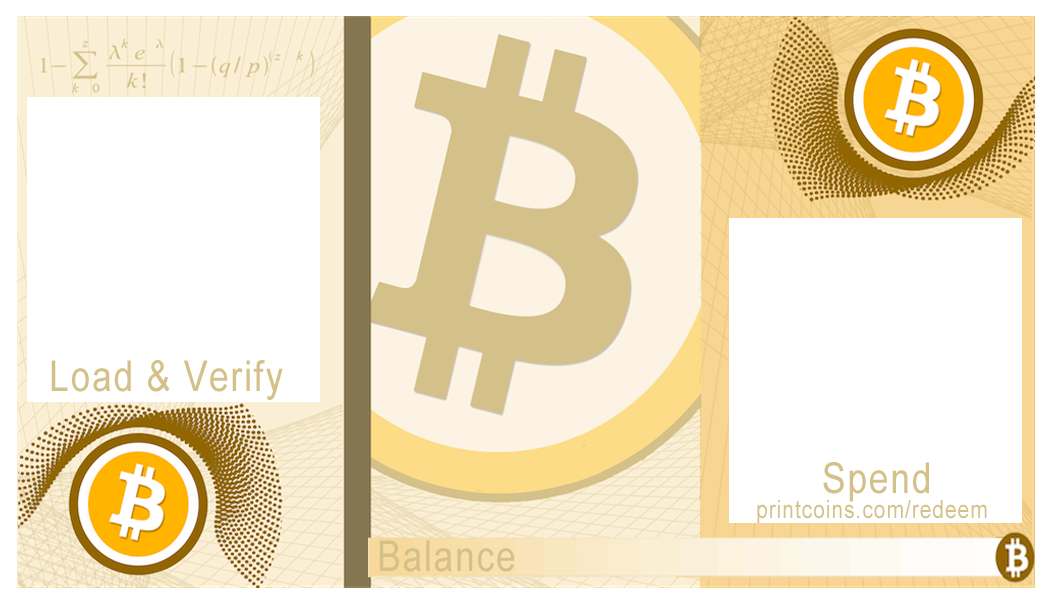
<style>
.page{position:relative;width:1050px;height:600px;background:#ffffff}
.page>*{position:absolute;margin:0}
.t1{font:42.5px "ArialMT";letter-spacing:0.05em;color:#d4c18a;scale:0.83 1}
.t2{font:25px "ArialMT";letter-spacing:0.05em;color:#d4c18a;scale:0.83 1}
</style>
<div class="page">
<p class="t1" style="left:51px;top:360px;width:232px;height:40px">Load &amp; Verify</p>
<p class="t1" style="left:823px;top:462px;width:106px;height:40px">Spend</p>
<p class="t2" style="left:757px;top:500px;width:230px;height:23px">printcoins.com/redeem</p>
<p class="t1" style="left:379px;top:540px;width:136px;height:32px">Balance</p>
</div>
